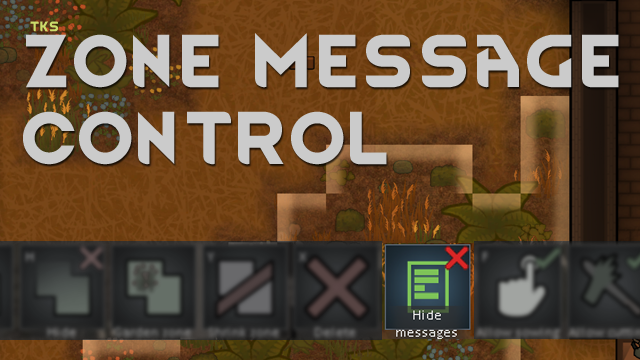
<style>
.page{position:relative;width:640px;height:360px}
.page>*{position:absolute;margin:0}
.t1{font:12px "RimWordFont";color:#cadb6a}
.t2{font:63.5px "RimWordFont";color:#cbcbcb}
</style>
<div class="page">
<p class="t1" style="left:30px;top:21px;width:28px;height:11px">tks</p>
<p class="t2" style="left:23px;top:33px;width:596px;height:132px">Zone Message<br>Control</p>
</div>
